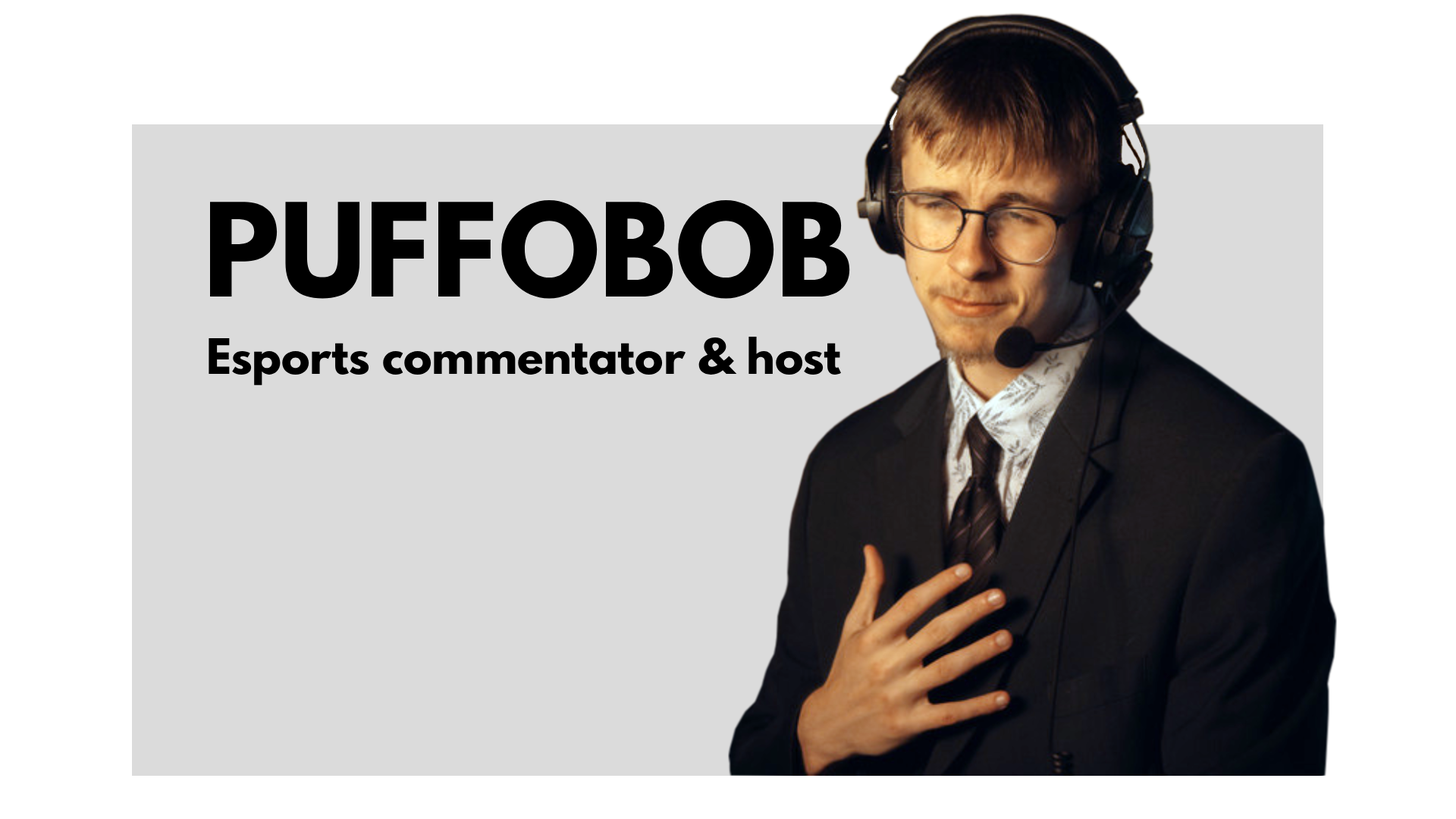
<style>
.page{position:relative;width:1456px;height:819px;background:#dbdbdb}
.page>*{position:absolute;margin:0}
.t1{font:126.2px "SpartanMB-ExtraBold";color:#000000}
.t2{font:47.6px "SpartanMB-ExtraBold";color:#000000}
</style>
<div class="page">
<p class="t1" style="left:209px;top:199px;width:641px;height:100px">PUFFOBOB</p>
<p class="t2" style="left:209px;top:337px;width:632px;height:48px">Esports commentator &amp; host</p>
</div>
